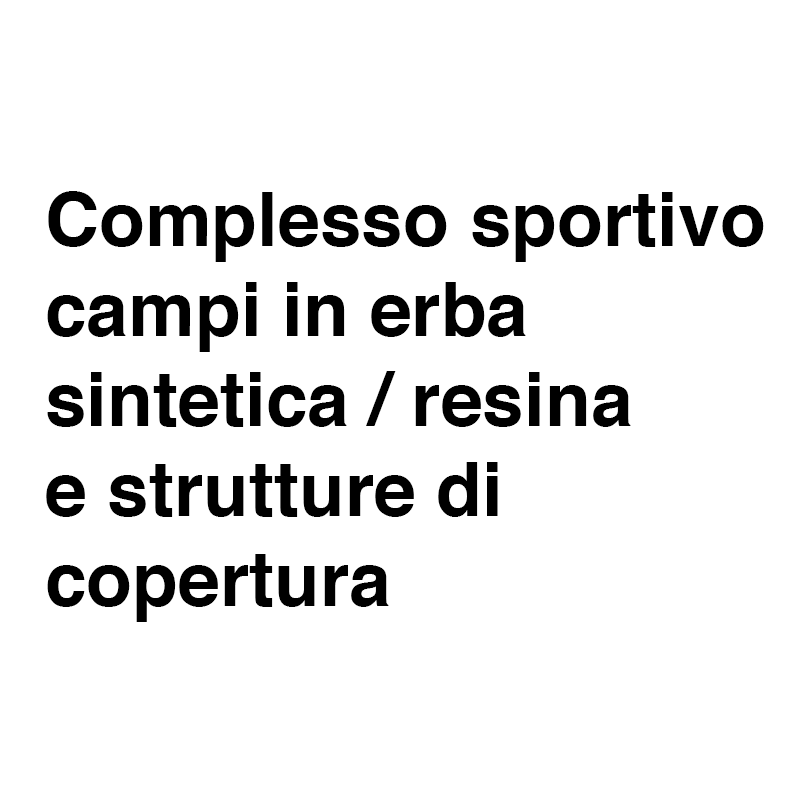
<style>
.page{position:relative;width:800px;height:800px;background:#ffffff}
.page>*{position:absolute;margin:0}
.t1{font:75px "Helvetica-Bold";color:#000000}
</style>
<div class="page">
<p class="t1" style="left:46px;top:191px;width:718px;height:431px">Complesso sportivo<br>campi in erba<br>sintetica / resina<br>e strutture di<br>copertura</p>
</div>
